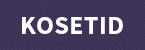
<style>
.page{position:relative;width:145px;height:50px}
.page>*{position:absolute;margin:0}
.t1{font:26px "SourceSansPro-Bold";letter-spacing:0.025em;color:#ffffff}
</style>
<div class="page">
<p class="t1" style="left:22px;top:17px;width:101px;height:17px">KOSETID</p>
</div>
